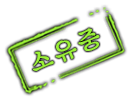
<style>
.page{position:relative;width:130px;height:99px;background:#ffffff}
.page>*{position:absolute;margin:0}
.t1{font:25px "SDKukdetopokki-aLt";letter-spacing:0.12em;color:#9af037}
</style>
<div class="page">
<p class="t1" style="left:33px;top:28px;width:67px;height:43px;rotate:-22deg">소유중</p>
</div>
